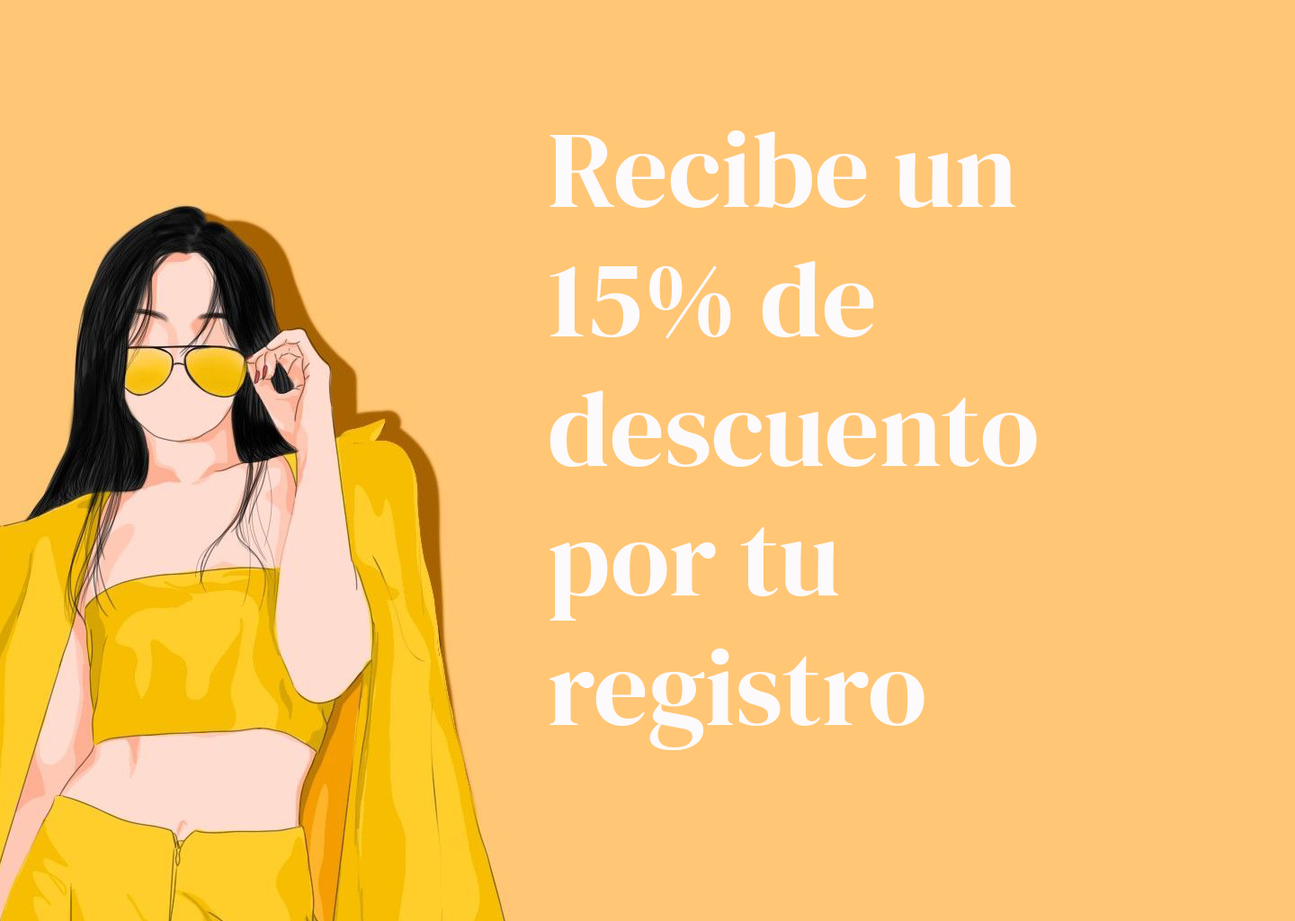
<style>
.page{position:relative;width:1295px;height:921px;background:#ffc675}
.page>*{position:absolute;margin:0}
.t1{font:107.9px "DMSerifDisplay-Regular";color:#fcfafa}
</style>
<div class="page">
<p class="t1" style="left:549px;top:130px;width:488px;height:620px">Recibe un 15% de descuento por tu registro</p>
</div>
